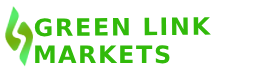
<style>
.page{position:relative;width:253px;height:75px;background:#ffffff}
.page>*{position:absolute;margin:0}
.t1{font:41px "Arial-Black";letter-spacing:0.04em;color:#31ba0a;text-transform:uppercase}
</style>
<div class="page">
<p class="t1" style="left:34px;top:17px;width:177px;height:20px">Green Link</p>
<p class="t1" style="left:35px;top:45px;width:135px;height:19px">Markets</p>
</div>
